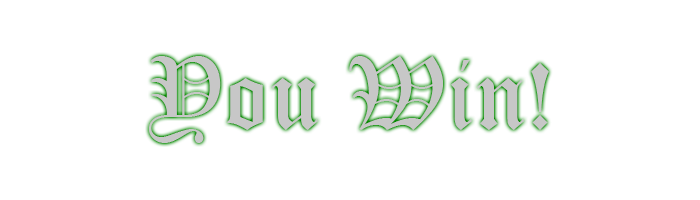
<style>
.page{position:relative;width:700px;height:200px;background:#ffffff}
.page>*{position:absolute;margin:0}
.t1{font:100px "OldEnglishTextMT";color:#c8c8c8}
</style>
<div class="page">
<p class="t1" style="left:149px;top:56px;width:400px;height:87px">You Win!</p>
</div>
